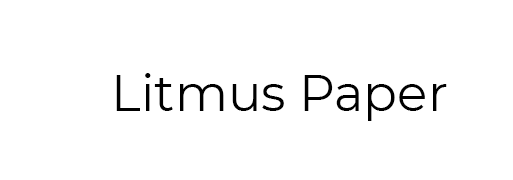
<style>
.page{position:relative;width:513px;height:180px;background:#ffffff}
.page>*{position:absolute;margin:0}
.t1{font:50px "Montserrat-Regular";color:#000000}
</style>
<div class="page">
<p class="t1" style="left:116px;top:73px;width:331px;height:48px">Litmus Paper</p>
</div>
